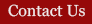
<style>
.page{position:relative;width:92px;height:24px;background:#960909}
.page>*{position:absolute;margin:0}
.t1{font:16px "Georgia";color:#f3e8e8}
</style>
<div class="page">
<p class="t1" style="left:8px;top:4px;width:77px;height:13px">Contact Us</p>
</div>
